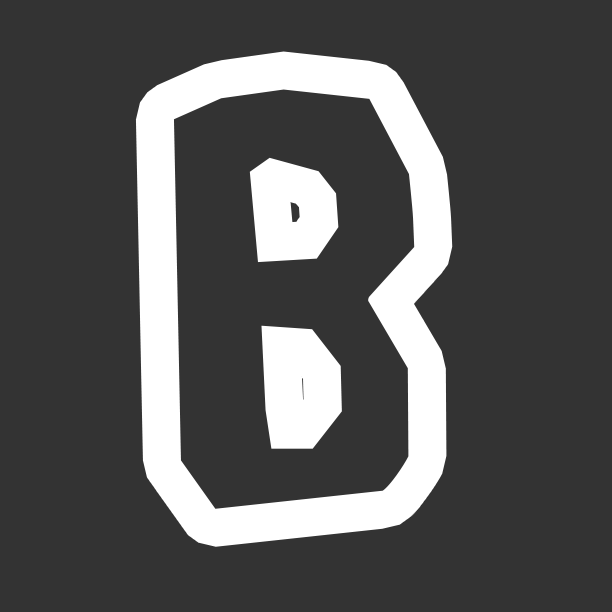
<style>
.page{position:relative;width:612px;height:612px;background:#333333}
.page>*{position:absolute;margin:0}
.t1{font:583px "DKSnippitySnap";letter-spacing:0.04em;color:#333333}
</style>
<div class="page">
<p class="t1" style="left:173px;top:89px;width:242px;height:420px">B</p>
</div>
